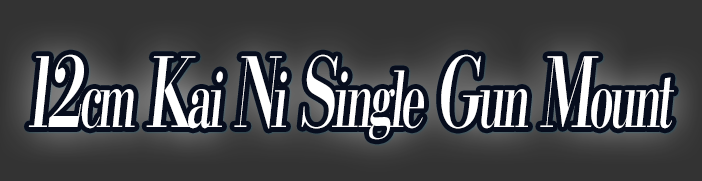
<style>
.page{position:relative;width:702px;height:181px;background:#333333}
.page>*{position:absolute;margin:0}
.t1{font:76.8px "KochoStd-Heavy";letter-spacing:-0.08em;color:#ffffff;font-style:italic;scale:0.58 1}
.t2{font:96px "KochoStd-Heavy";letter-spacing:-0.08em;color:#ffffff;font-style:italic;scale:0.58 1}
</style>
<div class="page">
<p class="t1" style="left:28px;top:54px;width:646px;height:86px"><span class="t2">12</span>cm<span class="t2"> K</span>ai<span class="t2"> N</span>i<span class="t2"> S</span>ingle<span class="t2"> G</span>un<span class="t2"> M</span>ount</p>
</div>
